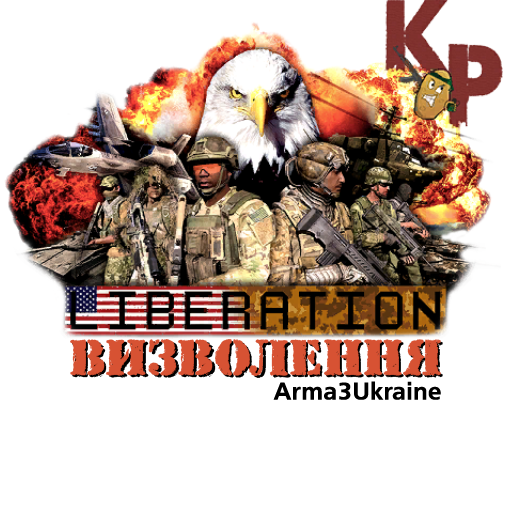
<style>
.page{position:relative;width:512px;height:512px;background:#ffffff}
.page>*{position:absolute;margin:0}
.t1{font:49.1px "AStamperRgBt";letter-spacing:0.01em;color:#d75233}
.t2{font:24px "FreeSetC-Bold";letter-spacing:0.01em;color:#000000}
</style>
<div class="page">
<p class="t1" style="left:70px;top:339px;width:371px;height:37px">ВИЗВОЛЕННЯ</p>
<p class="t1" style="left:72px;top:341px;width:371px;height:37px">ВИЗВОЛЕННЯ</p>
<p class="t2" style="left:273px;top:381px;width:168px;height:19px">Arma3Ukraine</p>
</div>
